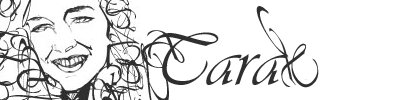
<style>
.page{position:relative;width:400px;height:100px;background:#ffffff}
.page>*{position:absolute;margin:0}
.t1{font:48.9px "Vivaldii";color:#2f2f2f}
.t2{font:74.7px "Vivaldii";color:#2f2f2f}
</style>
<div class="page">
<p class="t1" style="left:141px;top:30px;width:44px;height:38px;rotate:54deg">T</p>
<p class="t2" style="left:148px;top:32px;width:140px;height:53px">Tara</p>
</div>
